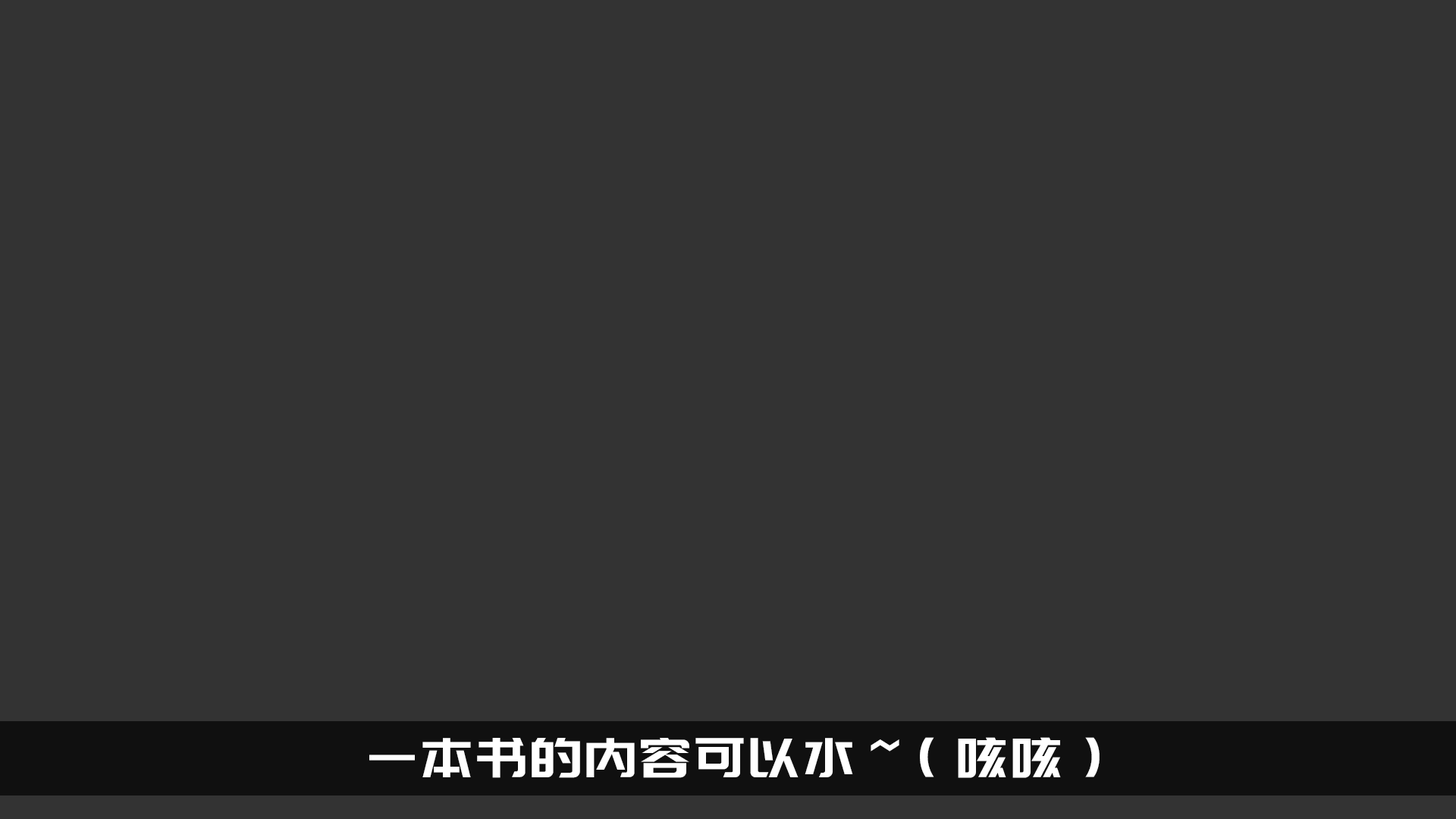
<style>
.page{position:relative;width:1456px;height:819px;background:#333333}
.page>*{position:absolute;margin:0}
.t1{font:54.6px "PangMenZhengDao-3";color:#ffffff}
</style>
<div class="page">
<p class="t1" style="left:369px;top:737px;width:731px;height:41px">一本书的内容可以水~（咳咳）</p>
</div>
